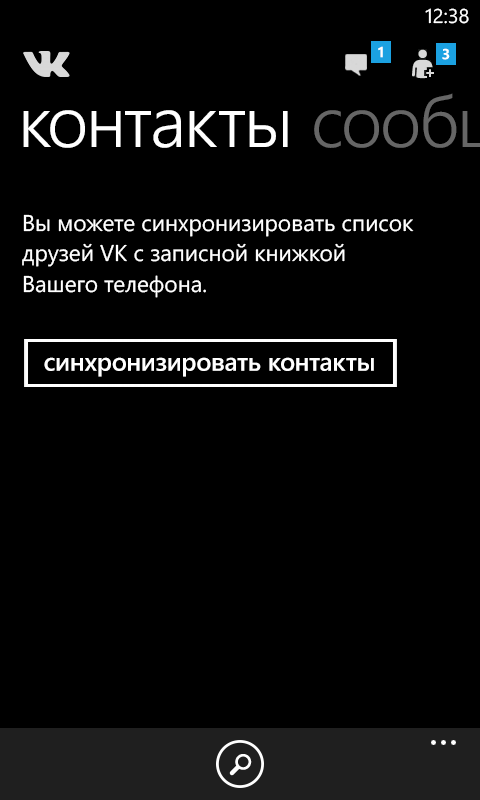
<style>
.page{position:relative;width:480px;height:800px;background:#000000}
.page>*{position:absolute;margin:0}
.t1{font:20px "SegoeWP";color:#ffffff}
.t2{font:14.7px "SegoeWP-Bold";color:#ffffff}
.t3{font:22.7px/30.7px "SegoeWP";color:#ffffff}
.t4{font:25.3px "SegoeWP-Semibold";letter-spacing:-0.01em;color:#ffffff}
</style>
<div class="page">
<p class="t1" style="left:425px;top:8px;width:44px;height:16px">12:38</p>
<p class="t2" style="left:378px;top:46px;width:5px;height:12px">1</p>
<p class="t2" style="left:442px;top:48px;width:8px;height:12px">3</p>
<p class="t3" style="left:22px;top:214px;width:392px;height:84px">Вы можете синхронизировать список<br>друзей VK с записной книжкой<br>Вашего телефона.</p>
<p class="t4" style="left:44px;top:357px;width:330px;height:20px">синхронизировать контакты</p>
</div>
